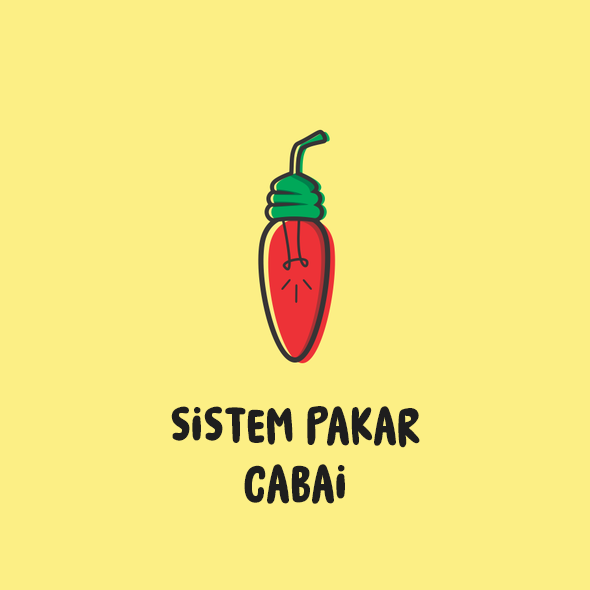
<style>
.page{position:relative;width:590px;height:590px;background:#fcef85}
.page>*{position:absolute;margin:0}
.t1{font:48px "DesignatedDriverDEMO";color:#1e1e1e}
</style>
<div class="page">
<p class="t1" style="left:171px;top:406px;width:249px;height:98px;text-align:center">sistem pakar<br>cabai</p>
</div>
